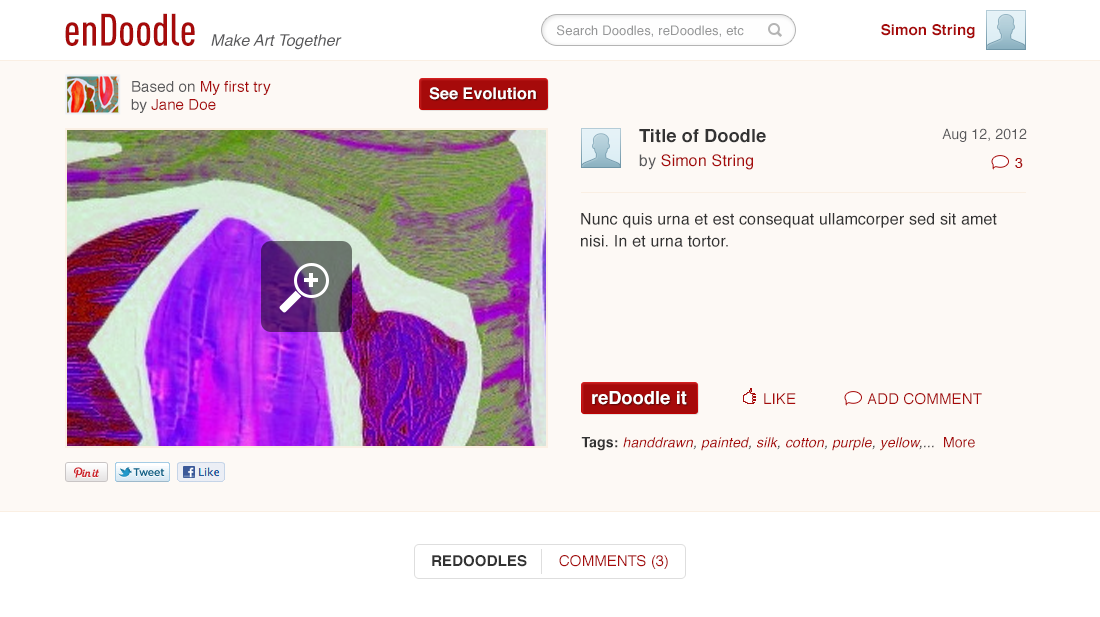
<style>
.page{position:relative;width:1100px;height:617px;background:#fdf9f5}
.page>*{position:absolute;margin:0}
.t1{font:45px "DINCond-Medium";color:#a60a0a}
.t2{font:13px "Helvetica";letter-spacing:0.01em;color:#969798}
.t3{font:15px "Helvetica-Bold";letter-spacing:0.01em;color:#a60a0a}
.t4{font:16px "Helvetica-Oblique";color:#59595b}
.t5{font:15px "Helvetica";letter-spacing:0.01em;color:#a60a0a}
.t6{font:15px "Helvetica";letter-spacing:0.01em;color:#59595b}
.t7{font:16px "Helvetica-Bold";letter-spacing:0.01em;color:#ffffff}
.t8{font:18px/24px "Helvetica-Bold";letter-spacing:0.01em;color:#333333}
.t9{font:16px/24px "Helvetica";letter-spacing:0.01em;color:#59595b}
.t10{font:16px/24px "Helvetica";letter-spacing:0.01em;color:#a60a0a}
.t11{font:14px "Helvetica";letter-spacing:0.01em;color:#59595b}
.t12{font:14px "Helvetica";letter-spacing:0.01em;color:#a60a0a}
.t13{font:16px/22px "Helvetica";letter-spacing:0.01em;color:#333333}
.t14{font:18px "Helvetica-Bold";letter-spacing:0.01em;color:#ffffff}
.t15{font:14px "Helvetica-Oblique";letter-spacing:0.01em;color:#a60a0a}
.t16{font:14px "Helvetica-Bold";letter-spacing:0.01em;color:#333333}
.t17{font:14px "Helvetica-Oblique";letter-spacing:0.01em;color:#333333}
.t18{font:15px "Helvetica-Bold";letter-spacing:0.01em;color:#333333}
</style>
<div class="page">
<p class="t1" style="left:65px;top:13px;width:130px;height:33px">enDoodle</p>
<p class="t2" style="left:557px;top:25px;width:187px;height:12px">Search Doodles, reDoodles, etc</p>
<p class="t3" style="left:881px;top:24px;width:94px;height:15px">Simon String</p>
<p class="t4" style="left:211px;top:34px;width:131px;height:16px">Make Art Together</p>
<p class="t5" style="left:131px;top:81px;width:140px;height:32px"><span class="t6">Based on </span>My first try<br><span class="t6">by </span>Jane Doe</p>
<p class="t7" style="left:429px;top:87px;width:107px;height:13px">See Evolution</p>
<p class="t8" style="left:639px;top:129px;width:127px;height:41px">Title of Doodle<br><span class="t9">by </span><span class="t10">Simon String</span></p>
<p class="t11" style="left:942px;top:128px;width:85px;height:14px">Aug 12, 2012</p>
<p class="t12" style="left:1015px;top:158px;width:8px;height:10px">3</p>
<p class="t13" style="left:581px;top:213px;width:416px;height:34px">Nunc quis urna et est consequat ullamcorper sed sit amet nisi. In et urna tortor.</p>
<p class="t14" style="left:592px;top:391px;width:95px;height:14px">reDoodle it</p>
<p class="t5" style="left:764px;top:393px;width:32px;height:11px">LIKE</p>
<p class="t5" style="left:867px;top:393px;width:115px;height:12px">ADD COMMENT</p>
<p class="t15" style="left:581px;top:437px;width:394px;height:14px"><span class="t16">Tags: </span>handdrawn<span class="t17">, </span>painted<span class="t17">, </span>silk<span class="t17">, </span>cotton<span class="t17">, </span>purple<span class="t17">, </span>yellow<span class="t17">,...  </span><span class="t12">More</span></p>
<p class="t18" style="left:432px;top:555px;width:95px;height:12px">REDOODLES</p>
<p class="t5" style="left:559px;top:555px;width:109px;height:14px">COMMENTS (3)</p>
</div>
